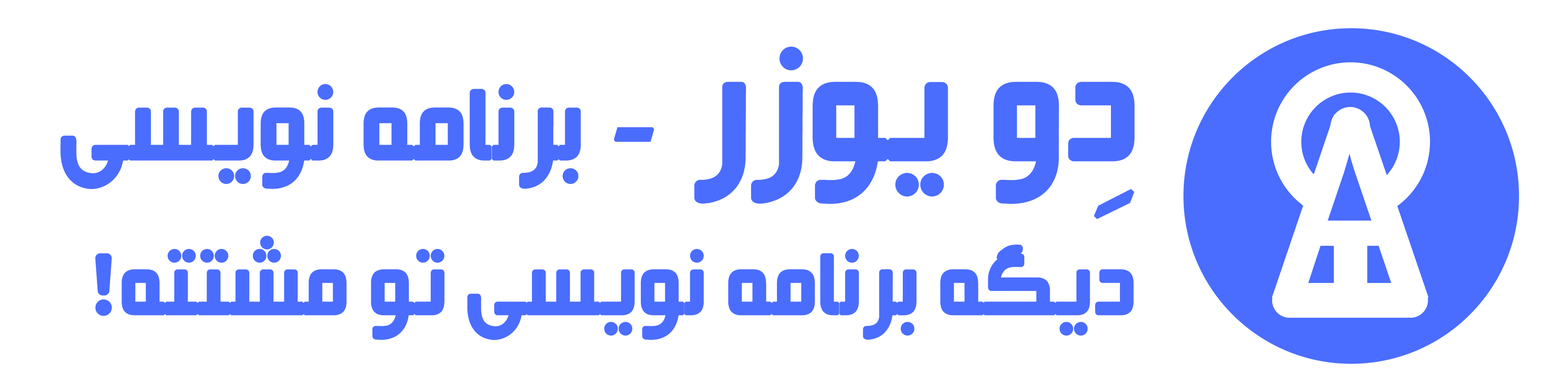
<style>
.page{position:relative;width:1568px;height:392px;background:#ffffff}
.page>*{position:absolute;margin:0}
.t1{font:117.6px "Mj_BeirutMd";letter-spacing:-0.01em;color:#4b6dfe;font-weight:bold}
.t2{font:176.4px "Mj_BeirutMd";letter-spacing:-0.01em;color:#4b6dfe;font-weight:bold}
.t3{font:171.3px "Mj_BeirutMd";letter-spacing:-0.01em;color:#4b6dfe;font-weight:bold}
.t4{font:101.9px "Mj_BeirutMd";letter-spacing:-0.01em;color:#4b6dfe;font-weight:bold}
</style>
<div class="page">
<p class="t1" style="left:60px;top:47px;width:1075px;height:157px"><span class="t2">دو یوزر </span>- برنامه نویسی</p>
<p class="t3" style="left:1094px;top:189px;width:40px;height:30px">ِ</p>
<p class="t4" style="left:95px;top:236px;width:1039px;height:104px">دیگه برنامه نویسی تو مشتته!</p>
</div>
